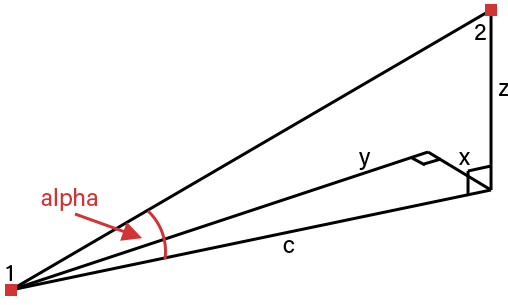
<style>
.page{position:relative;width:508px;height:305px;background:#ffffff}
.page>*{position:absolute;margin:0}
.t1{font:24px "AcuminPro-Regular";color:#000000}
.t2{font:24px "AcuminPro-Regular";color:#d03434}
</style>
<div class="page">
<p class="t1" style="left:475px;top:24px;width:11px;height:16px">2</p>
<p class="t1" style="left:499px;top:83px;width:10px;height:13px">z</p>
<p class="t1" style="left:359px;top:152px;width:12px;height:18px">y</p>
<p class="t1" style="left:459px;top:152px;width:11px;height:13px">x</p>
<p class="t2" style="left:41px;top:188px;width:57px;height:23px">alpha</p>
<p class="t1" style="left:283px;top:240px;width:12px;height:13px">c</p>
<p class="t1" style="left:6px;top:265px;width:6px;height:16px">1</p>
</div>
